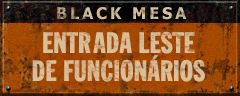
<style>
.page{position:relative;width:240px;height:96px}
.page>*{position:absolute;margin:0}
.t1{font:29.3px/28px "FraseliusExtraCondensedNormal";letter-spacing:0.01em;color:#dac098;text-transform:uppercase;scale:1.1 1}
</style>
<div class="page">
<p class="t1" style="left:32px;top:31px;width:173px;height:51px;text-align:center">entrada leste<br>de funcionários</p>
</div>
